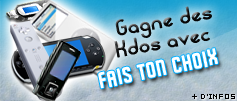
<style>
.page{position:relative;width:237px;height:101px}
.page>*{position:absolute;margin:0}
.t1{font:18px/21px "curls";color:#0c0c0c;font-weight:bold;scale:1.1 1}
.t2{font:22px "FeaturedItem";color:#ffffff;font-weight:bold}
.t3{font:8px "04b03b";color:#0c0c0c;scale:1.1 1}
.t4{font:8px "Verdana";color:#0c0c0c;scale:1.1 1}
</style>
<div class="page">
<p class="t1" style="left:114px;top:6px;width:98px;height:52px;text-align:right;rotate:-11deg">Gagne des<br>Kdos avec</p>
<p class="t2" style="left:98px;top:48px;width:120px;height:41px;rotate:-12deg">FAIS TON CHOIX</p>
<p class="t3" style="left:192px;top:94px;width:43px;height:5px"><span class="t4">+</span> D'INFOS</p>
</div>
